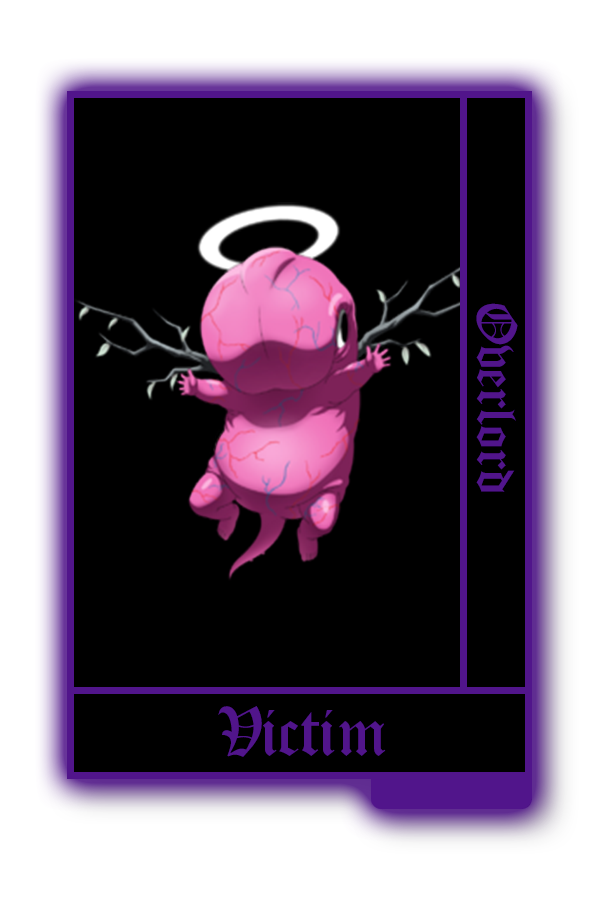
<style>
.page{position:relative;width:600px;height:900px;background:#000000}
.page>*{position:absolute;margin:0}
.t1{font:61.5px "OldLondon";color:#51158b}
.t2{font:75px "OldLondon";color:#51158b}
</style>
<div class="page">
<p class="t1" style="left:476px;top:303px;width:42px;height:189px;rotate:90deg">Overlord</p>
<p class="t2" style="left:218px;top:706px;width:168px;height:51px">Victim</p>
</div>
